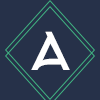
<style>
.page{position:relative;width:100px;height:100px;background:#263149}
.page>*{position:absolute;margin:0}
.t1{font:50px "Arkhip";color:#ffffff}
</style>
<div class="page">
<p class="t1" style="left:31px;top:31px;width:39px;height:39px">A</p>
</div>
